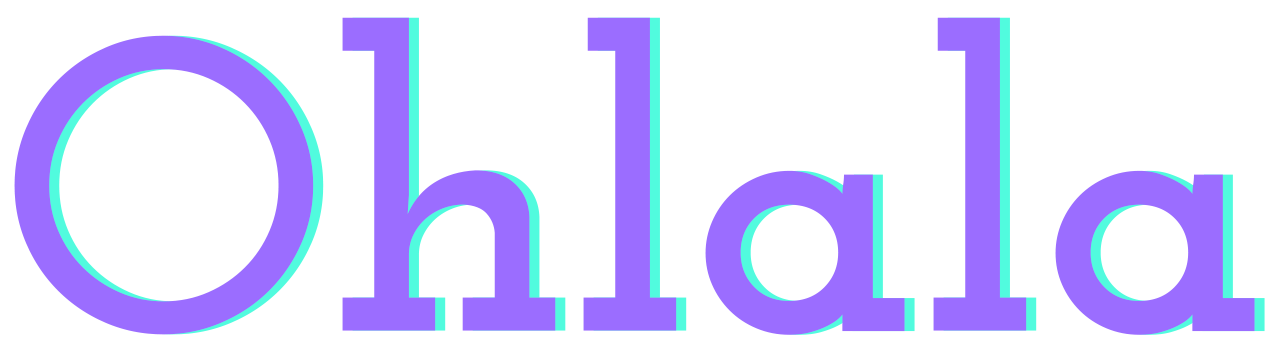
<style>
.page{position:relative;width:1278px;height:352px;background:#ffffff}
.page>*{position:absolute;margin:0}
.t1{font:416.7px "JosefinSlab-Bold";color:#9b6dff}
</style>
<div class="page">
<p class="t1" style="left:14px;top:17px;width:1241px;height:318px">Ohlala</p>
<p class="t1" style="left:24px;top:17px;width:1241px;height:318px">Ohlala</p>
</div>
